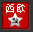
<style>
.page{position:relative;width:33px;height:32px;background:#c50000}
.page>*{position:absolute;margin:0}
.t1{font:10.4px "SimSun";color:#ffffff}
</style>
<div class="page">
<p class="t1" style="left:6px;top:4px;width:19px;height:9px">西欧</p>
</div>
